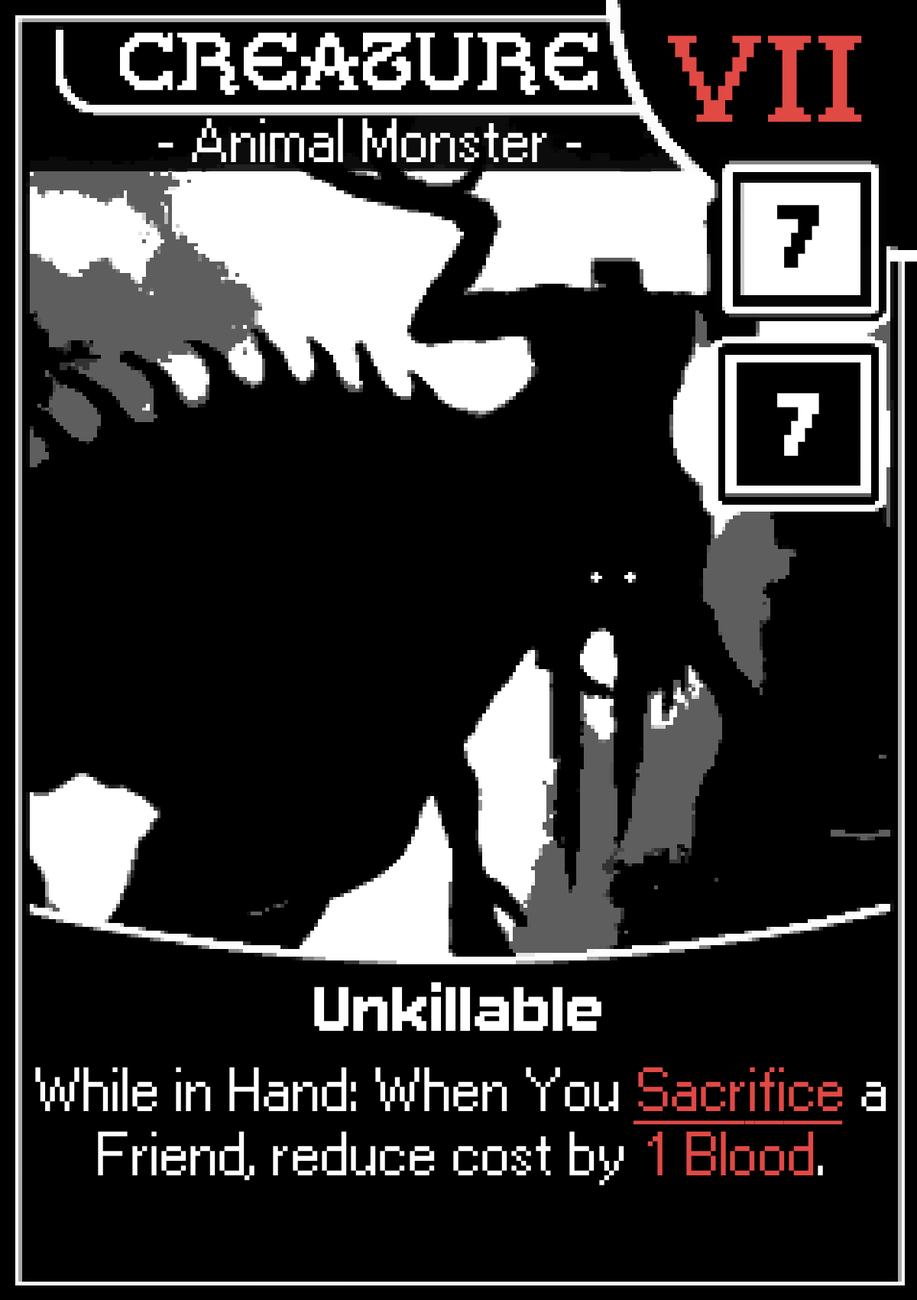
<style>
.page{position:relative;width:917px;height:1300px;background:#000000}
.page>*{position:absolute;margin:0}
.t1{font:76.5px "GallaeciaForte";color:#ffffff}
.t2{font:114.7px "GallaeciaForte";color:#e04944}
.t3{font:53.5px "Ari-W9500-Regular";color:#ffffff}
.t4{font:76.5px "AriW9500-Condensed-Display";color:#000000}
.t5{font:76.5px "AriW9500-Condensed-Display";color:#ffffff}
.t6{font:53.5px "Ari-W9500-Display";color:#ffffff}
.t7{font:53.5px "Ari-W9500-Regular";color:#e04944;text-decoration:underline}
.t8{font:53.5px "Ari-W9500-Regular";color:#e04944}
</style>
<div class="page">
<p class="t1" style="left:120px;top:32px;width:478px;height:63px">Creature</p>
<p class="t2" style="left:668px;top:35px;width:194px;height:87px">VII</p>
<p class="t3" style="left:158px;top:118px;width:424px;height:44px">- Animal Monster -</p>
<p class="t4" style="left:778px;top:205px;width:42px;height:63px">7</p>
<p class="t5" style="left:778px;top:393px;width:42px;height:63px">7</p>
<p class="t6" style="left:314px;top:982px;width:288px;height:49px">Unkillable</p>
<p class="t3" style="left:35px;top:1067px;width:852px;height:118px;text-align:center">While in Hand: When You <span class="t7">Sacrifice </span>a Friend, reduce cost by <span class="t8">1 Blood</span>.</p>
</div>
